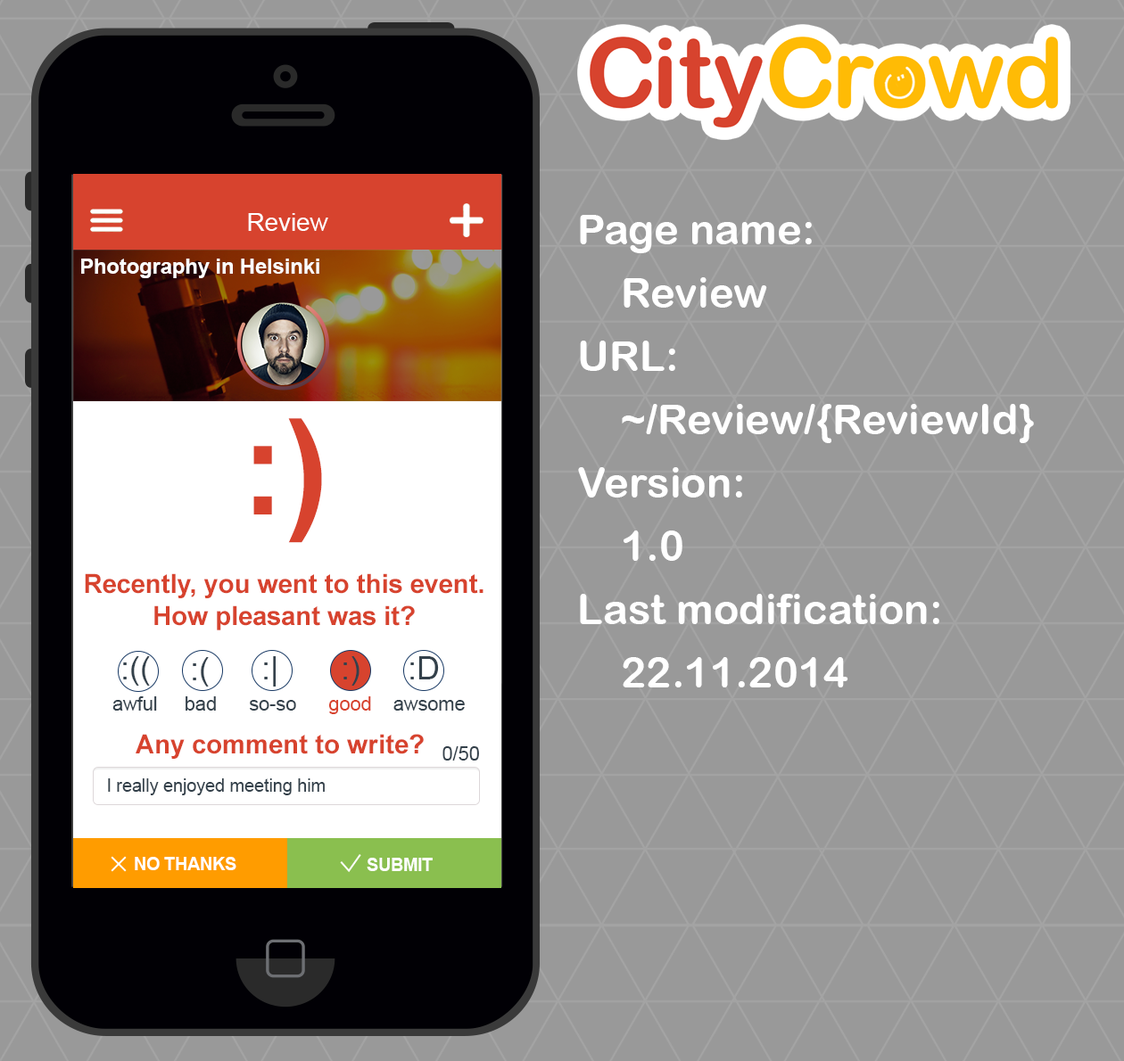
<style>
.page{position:relative;width:1124px;height:1061px;background:#999999}
.page>*{position:absolute;margin:0}
.t1{font:24.6px "ArialMT";color:#ffffff}
.t2{font:42.2px/63.3px "ArialRoundedMTBold";color:#ffffff}
.t3{font:21.1px "Arial-BoldMT";color:#fcfdfd}
.t4{font:26.4px/79.1px "Arial-BoldMT";color:#d7432e}
.t5{font:131.9px/79.1px "Arial-BoldMT";color:#d7432e}
.t6{font:26.4px/31.7px "Arial-BoldMT";color:#d7432e}
.t7{font:31.7px "ArialMT";color:#34414b}
.t8{font:19.3px "ArialMT";color:#34414b}
.t9{font:19.3px "ArialMT";color:#d7432e}
.t10{font:26.4px "Arial-BoldMT";color:#d7432e}
.t11{font:17.6px "ArialMT";color:#34414b}
.t12{font:17.6px "Arial-BoldMT";color:#ffffff}
</style>
<div class="page">
<p class="t1" style="left:248px;top:213px;width:80px;height:18px">Review</p>
<p class="t2" style="left:578px;top:215px;width:456px;height:473px">Page name:<br>Review<br>URL:<br>~/Review/{ReviewId}<br>Version:<br>1.0<br>Last modification:<br>22.11.2014</p>
<p class="t3" style="left:81px;top:259px;width:238px;height:19px">Photography in Helsinki</p>
<p class="t4" style="left:85px;top:418px;width:398px;height:212px;text-align:center"><span class="t5">:)<br></span>Recently, you went to this event.<br><span class="t6">How pleasant was it?</span></p>
<p class="t7" style="left:123px;top:656px;width:27px;height:30px">:((</p>
<p class="t7" style="left:193px;top:657px;width:16px;height:30px">:(</p>
<p class="t7" style="left:264px;top:656px;width:12px;height:31px">:|</p>
<p class="t7" style="left:343px;top:656px;width:16px;height:30px">:)</p>
<p class="t7" style="left:410px;top:656px;width:29px;height:24px">:D</p>
<p class="t8" style="left:112px;top:696px;width:353px;height:18px">awful     bad      so-so      <span class="t9">good    </span>awsome</p>
<p class="t10" style="left:136px;top:734px;width:288px;height:25px">Any comment to write?</p>
<p class="t8" style="left:442px;top:746px;width:37px;height:15px">0/50</p>
<p class="t11" style="left:108px;top:779px;width:217px;height:16px">I really enjoyed meeting him</p>
<p class="t12" style="left:135px;top:857px;width:101px;height:13px">NO THANKS</p>
<p class="t12" style="left:367px;top:858px;width:66px;height:13px">SUBMIT</p>
</div>
